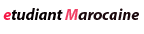
<style>
.page{position:relative;width:144px;height:34px;background:#ffffff}
.page>*{position:absolute;margin:0}
.t1{font:16px "MyriadPro-BoldIt";color:#1b090d}
.t2{font:16px "MyriadPro-BoldIt";color:#f51947}
.t3{font:16px "MyriadPro-BoldIt";color:#070102}
.t4{font:16px "MyriadPro-BoldIt";color:#f14065}
</style>
<div class="page">
<p class="t1" style="left:3px;top:8px;width:136px;height:12px"><span class="t2">e</span><span class="t3">tudiant </span><span class="t4">M</span>arocaine</p>
</div>
